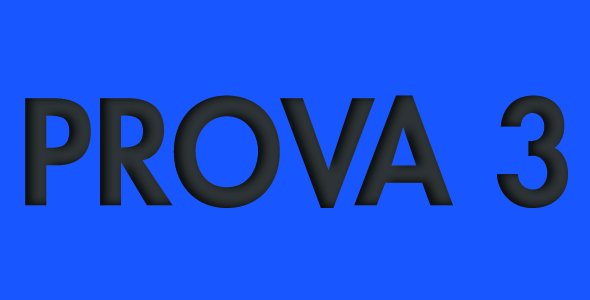
<style>
.page{position:relative;width:590px;height:300px;background:#1857ff}
.page>*{position:absolute;margin:0}
.t1{font:141.7px "FuturaStd-Heavy";color:#2d3336;text-transform:uppercase}
</style>
<div class="page">
<p class="t1" style="left:25px;top:95px;width:543px;height:113px">prova 3</p>
</div>
